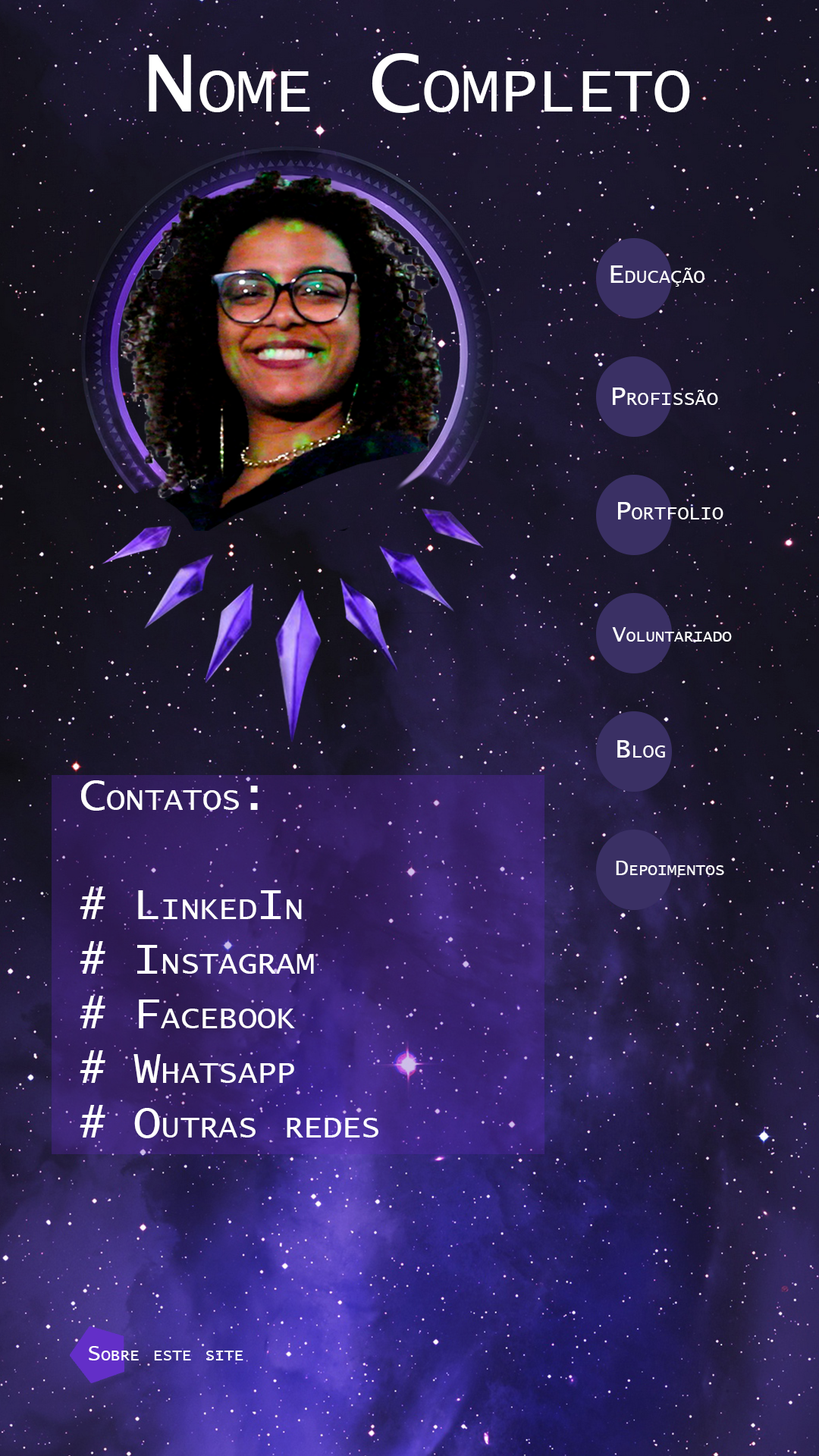
<style>
.page{position:relative;width:819px;height:1456px}
.page>*{position:absolute;margin:0}
.t1{font:91px "LucidaConsole";color:#ffffff;font-variant:small-caps}
.t2{font:27.3px "LucidaConsole";color:#ffffff;font-variant:small-caps}
.t3{font:22.7px "LucidaConsole";color:#ffffff;font-variant:small-caps}
.t4{font:45.5px "LucidaConsole";color:#ffffff;font-variant:small-caps}
.t5{font:4.5px "LucidaConsole";color:#ffffff;font-variant:small-caps}
</style>
<div class="page">
<p class="t1" style="left:149px;top:53px;width:541px;height:60px">Nome Completo</p>
<p class="t2" style="left:610px;top:265px;width:94px;height:22px">Educação</p>
<p class="t2" style="left:613px;top:388px;width:105px;height:17px">Profissão</p>
<p class="t2" style="left:618px;top:502px;width:105px;height:17px">Portfolio</p>
<p class="t3" style="left:612px;top:627px;width:120px;height:15px">Voluntariado</p>
<p class="t2" style="left:617px;top:740px;width:48px;height:18px">Blog</p>
<p class="t4" style="left:80px;top:780px;width:298px;height:358px">Contatos:<br><br># LinkedIn<span class="t5"><br></span># Instagram<br># Facebook<br># Whatsapp<br># Outras redes</p>
<p class="t3" style="left:616px;top:861px;width:108px;height:14px">Depoimentos</p>
<p class="t3" style="left:89px;top:1346px;width:154px;height:14px">Sobre este site</p>
</div>
